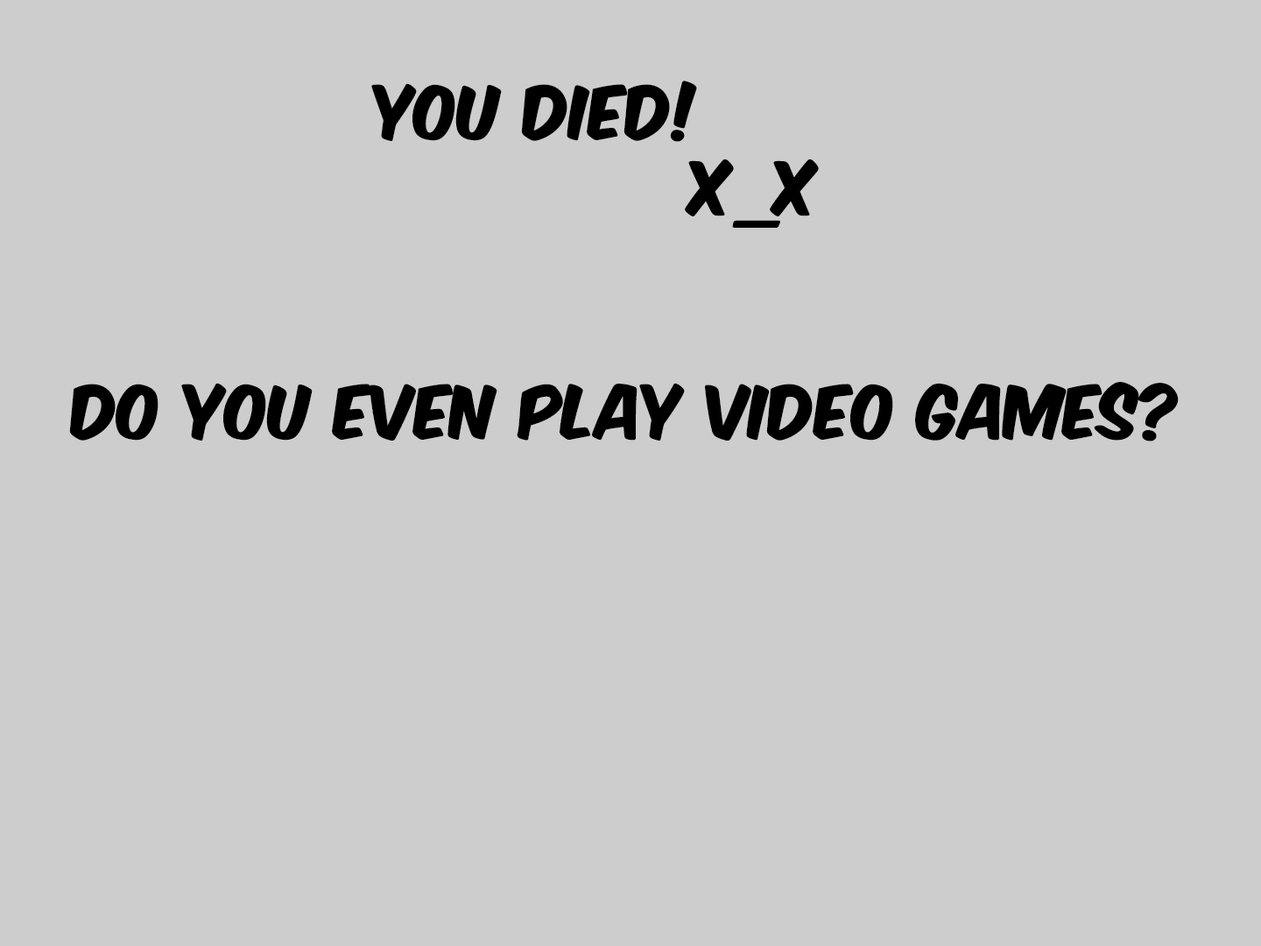
<style>
.page{position:relative;width:1261px;height:946px;background:#cdcdcd}
.page>*{position:absolute;margin:0}
.t1{font:63.1px "KomikaAxis";color:#000000}
</style>
<div class="page">
<p class="t1" style="left:371px;top:81px;width:448px;height:147px">you died!<br>           x_x</p>
<p class="t1" style="left:69px;top:382px;width:1110px;height:59px">do you even play video games?</p>
</div>
